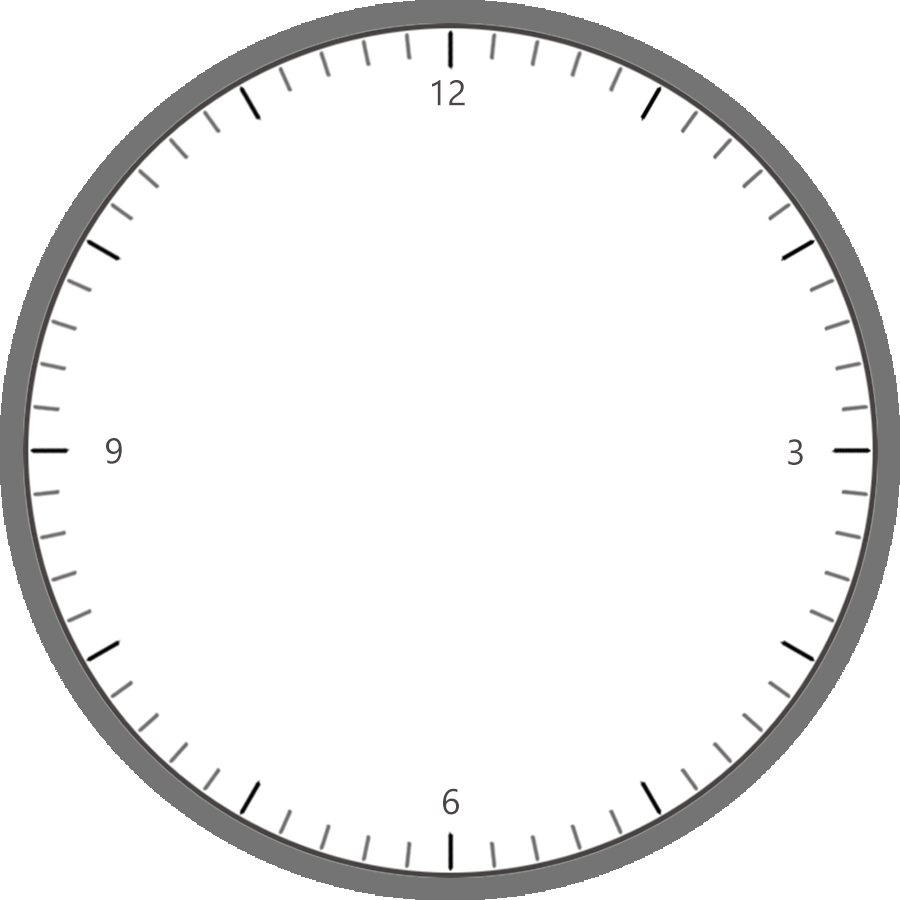
<style>
.page{position:relative;width:900px;height:900px;background:#ffffff}
.page>*{position:absolute;margin:0}
.t1{font:12.8px "SegoeUISymbol";color:#4a4646}
</style>
<div class="page">
<p class="t1" style="left:432px;top:80px;width:33px;height:26px">12</p>
<p class="t1" style="left:106px;top:438px;width:16px;height:26px">9</p>
<p class="t1" style="left:788px;top:439px;width:15px;height:26px">3</p>
<p class="t1" style="left:443px;top:788px;width:16px;height:27px">6</p>
</div>
